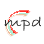
<style>
.page{position:relative;width:44px;height:44px;background:#ffffff}
.page>*{position:absolute;margin:0}
.t1{font:14px "BradleyHandITC";color:#272626;scale:1.5 1}
.t2{font:18px "BradleyHandITC";color:#272626;scale:1.5 1}
</style>
<div class="page">
<p class="t1" style="left:4px;top:16px;width:37px;height:15px"><span class="t2">  </span>mpd</p>
</div>
